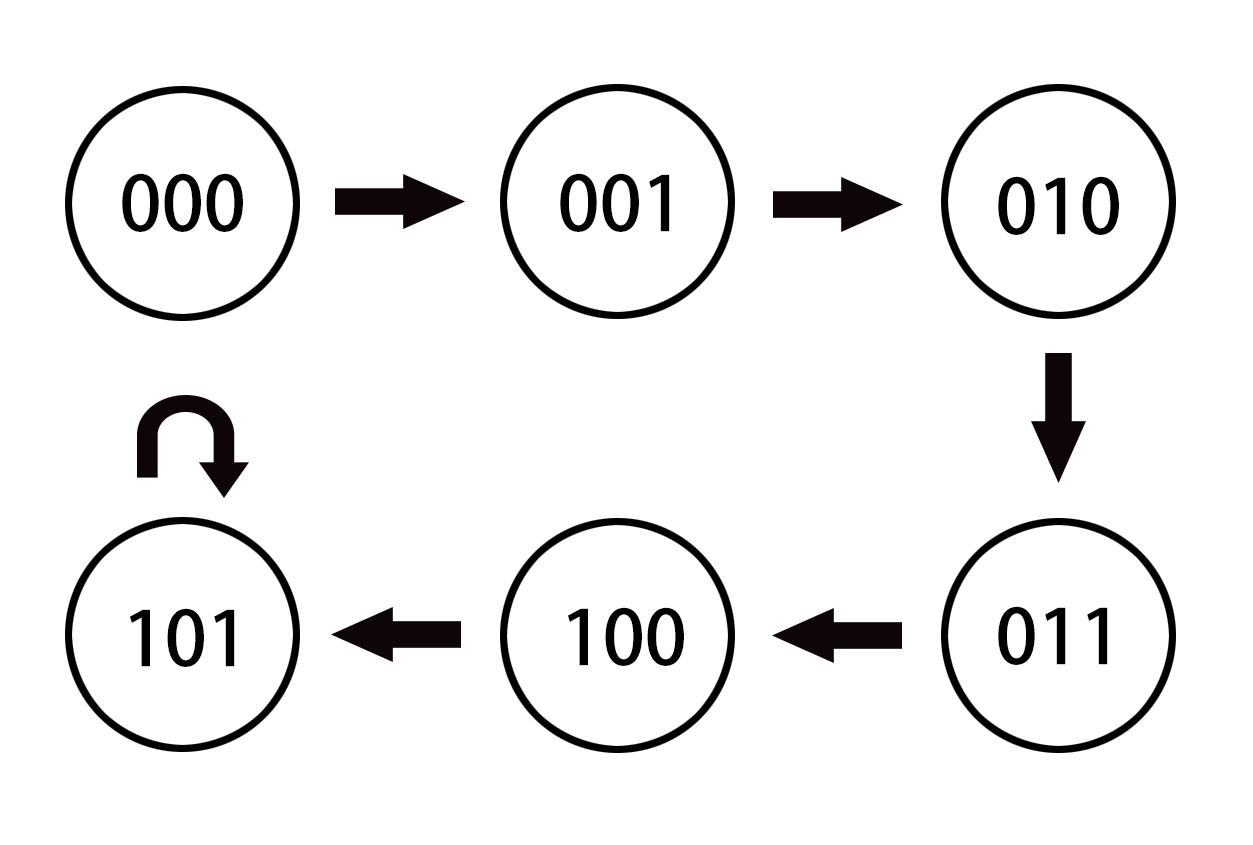
<style>
.page{position:relative;width:1253px;height:845px;background:#ffffff}
.page>*{position:absolute;margin:0}
.t1{font:75px "AdobeHeitiStd-Regular";color:#000000}
</style>
<div class="page">
<p class="t1" style="left:122px;top:173px;width:121px;height:59px">000</p>
<p class="t1" style="left:560px;top:173px;width:110px;height:59px">001</p>
<p class="t1" style="left:998px;top:176px;width:121px;height:59px">010</p>
<p class="t1" style="left:998px;top:606px;width:110px;height:59px">011</p>
<p class="t1" style="left:130px;top:608px;width:105px;height:59px">101</p>
<p class="t1" style="left:568px;top:607px;width:116px;height:59px">100</p>
</div>
